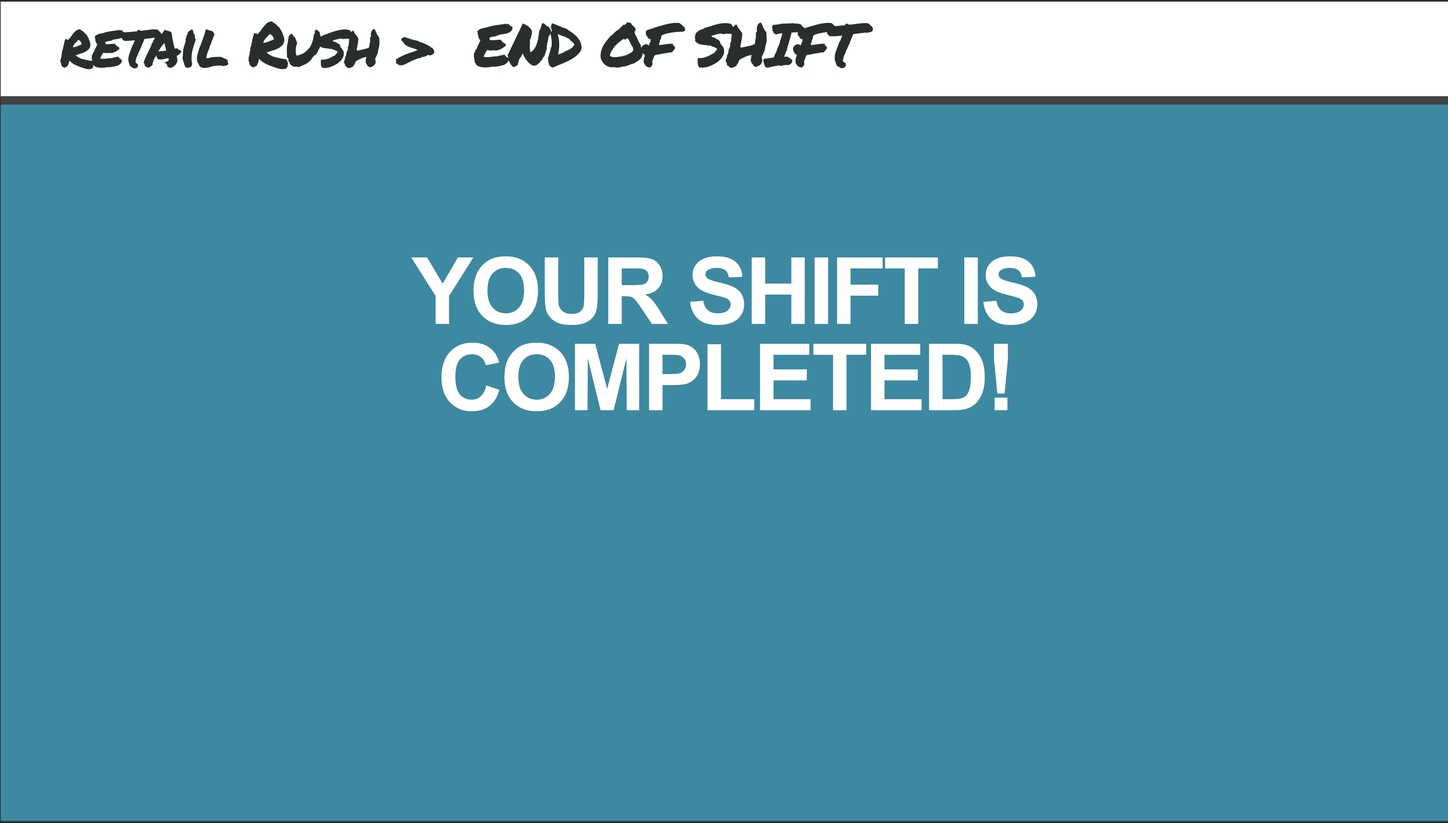
<style>
.page{position:relative;width:1448px;height:823px;background:#3d89a1}
.page>*{position:absolute;margin:0}
.t1{font:60px "PermanentMarker-Regular";letter-spacing:-0.04em;color:#2a2d2d}
.t2{font:60px "Arial-BoldMT";letter-spacing:-0.04em;color:#ffffff}
.t3{font:92.7px/86.6px "Arial-BoldMT";letter-spacing:-0.04em;color:#ffffff}
</style>
<div class="page">
<p class="t1" style="left:440px;top:22px;width:433px;height:47px"><span class="t2">E</span>END OF SHIFT</p>
<p class="t3" style="left:411px;top:257px;width:627px;height:154px;text-align:center">YOUR SHIFT IS<br>COMPLETED!</p>
</div>
